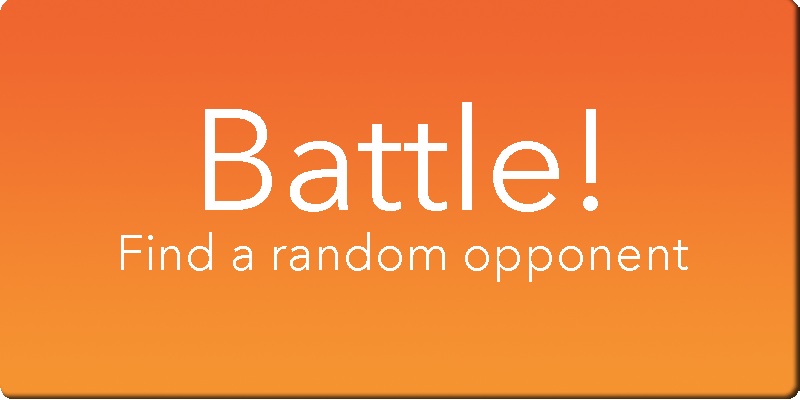
<style>
.page{position:relative;width:800px;height:400px}
.page>*{position:absolute;margin:0}
.t1{font:50px "AvenirNext-Regular";color:#ffffff}
.t2{font:142.9px "AvenirNext-Regular";color:#ffffff}
</style>
<div class="page">
<p class="t1" style="left:121px;top:102px;width:567px;height:180px;text-align:center"><span class="t2">Battle!<br></span>Find a random opponent</p>
</div>
